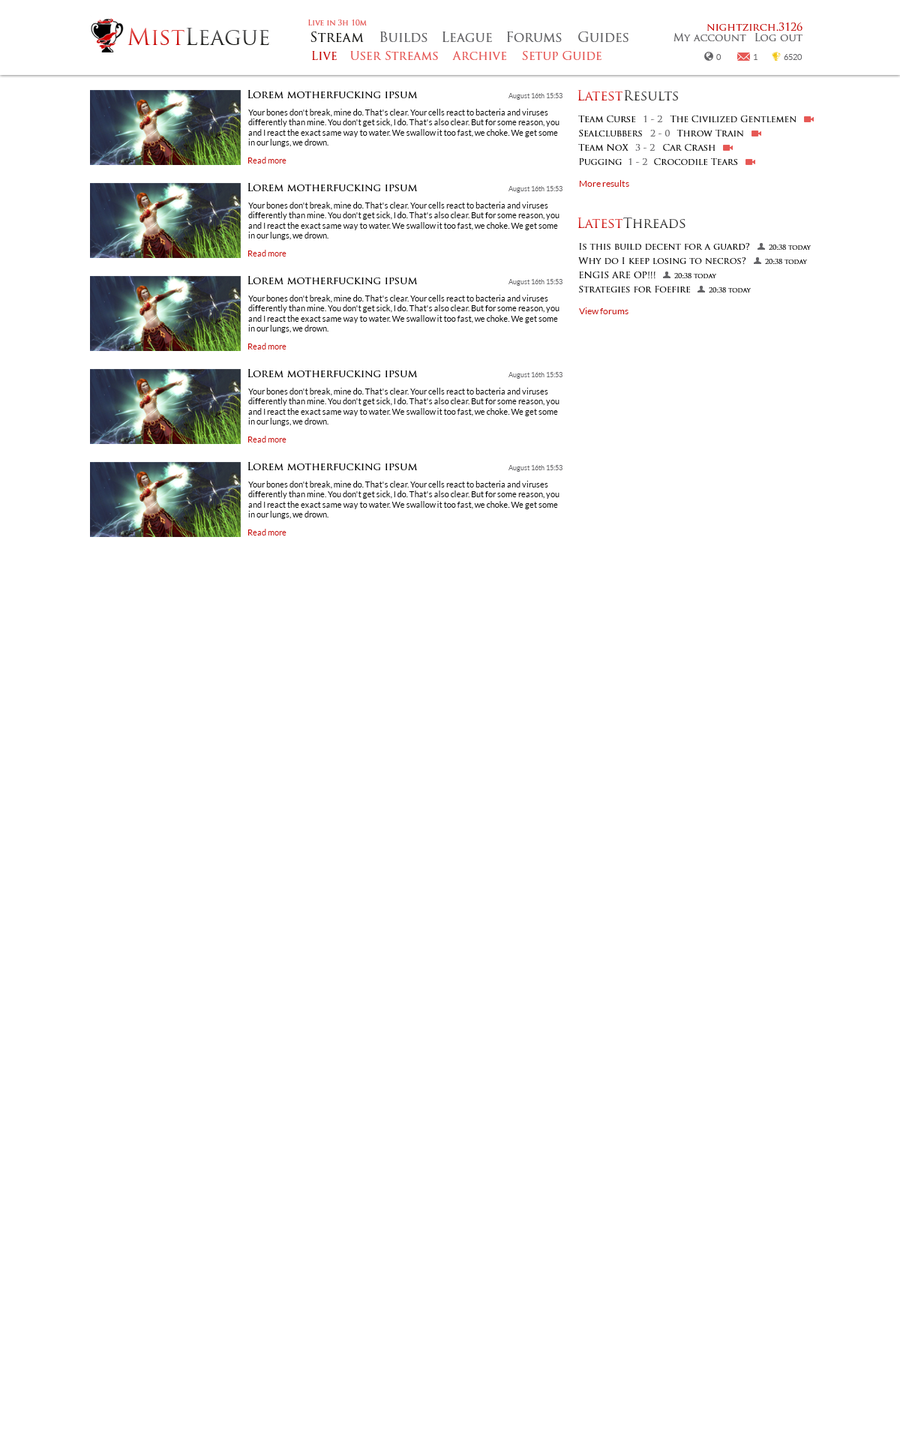
<style>
.page{position:relative;width:900px;height:1440px;background:#ffffff}
.page>*{position:absolute;margin:0}
.t1{font:22.5px "TrajanPro-Regular"}
.t2{font:7.5px "TrajanPro-Regular";color:#e65754}
.t3{font:10.5px "TrajanPro-Regular";color:#c90400}
.t4{font:13.5px "TrajanPro-Regular";color:#1c1c19}
.t5{font:13.5px "TrajanPro-Regular";color:#636366}
.t6{font:10.5px "TrajanPro-Regular";color:#636366}
.t7{font:12px "TrajanPro-Regular";color:#c90400}
.t8{font:12px "TrajanPro-Regular";color:#e65754}
.t9{font:8.2px "Lato-Regular";color:#636366}
.t10{font:10.5px "TrajanPro-Regular";color:#000000}
.t11{font:6.8px "Lato-Regular";color:#636366}
.t12{font:13.4px "TrajanPro-Regular"}
.t13{font:8.2px "Lato-Regular";color:#000000}
.t14{font:9px "TrajanPro-Regular";color:#000000}
.t15{font:9px "TrajanPro-Regular";color:#636366}
.t16{font:8.2px "Lato-Regular";color:#c90400}
.t17{font:9px "Lato-Regular";color:#c90400}
.t18{font:6.8px "TrajanPro-Regular";color:#000000}
</style>
<div class="page">
<p class="t1" style="left:128px;top:28px;width:56px;height:17px">Mist</p>
<p class="t1" style="left:186px;top:28px;width:83px;height:17px">League</p>
<p class="t2" style="left:308px;top:20px;width:59px;height:6px">Live in 3h 10m</p>
<p class="t3" style="left:706px;top:22px;width:96px;height:9px">nightzirch.3126</p>
<p class="t4" style="left:310px;top:32px;width:54px;height:10px">Stream</p>
<p class="t5" style="left:380px;top:32px;width:48px;height:10px">Builds</p>
<p class="t5" style="left:442px;top:32px;width:50px;height:10px">League</p>
<p class="t5" style="left:506px;top:32px;width:56px;height:10px">Forums</p>
<p class="t5" style="left:578px;top:32px;width:50px;height:10px">Guides</p>
<p class="t6" style="left:674px;top:33px;width:128px;height:8px">My account Log out</p>
<p class="t7" style="left:312px;top:51px;width:25px;height:9px">Live</p>
<p class="t8" style="left:350px;top:51px;width:88px;height:9px">User Streams</p>
<p class="t8" style="left:452px;top:51px;width:54px;height:9px">Archive</p>
<p class="t8" style="left:522px;top:51px;width:80px;height:9px">Setup Guide</p>
<p class="t9" style="left:716px;top:54px;width:5px;height:6px">0</p>
<p class="t9" style="left:754px;top:54px;width:4px;height:6px">1</p>
<p class="t9" style="left:784px;top:54px;width:18px;height:6px">6520</p>
<p class="t10" style="left:248px;top:90px;width:170px;height:8px">Lorem motherfucking ipsum</p>
<p class="t11" style="left:508px;top:93px;width:54px;height:7px">August 16th 15:53</p>
<p class="t12" style="left:578px;top:90px;width:44px;height:10px">Latest</p>
<p class="t12" style="left:624px;top:90px;width:54px;height:10px">Results</p>
<p class="t13" style="left:248px;top:109px;width:312px;height:38px">Your bones don't break, mine do. That's clear. Your cells react to bacteria and viruses differently than mine. You don't get sick, I do. That's also clear. But for some reason, you and I react the exact same way to water. We swallow it too fast, we choke. We get some in our lungs, we drown.</p>
<p class="t14" style="left:578px;top:116px;width:57px;height:6px">Team Curse</p>
<p class="t15" style="left:644px;top:116px;width:18px;height:6px">1 - 2</p>
<p class="t14" style="left:670px;top:116px;width:126px;height:6px">The Civilized Gentlemen</p>
<p class="t14" style="left:579px;top:130px;width:63px;height:6px">Sealclubbers</p>
<p class="t15" style="left:650px;top:130px;width:20px;height:6px">2 - 0</p>
<p class="t14" style="left:676px;top:130px;width:68px;height:6px">Throw Train</p>
<p class="t14" style="left:578px;top:144px;width:50px;height:7px">Team NoX</p>
<p class="t15" style="left:635px;top:144px;width:20px;height:7px">3 - 2</p>
<p class="t14" style="left:663px;top:144px;width:53px;height:7px">Car Crash</p>
<p class="t16" style="left:248px;top:157px;width:38px;height:7px">Read more</p>
<p class="t14" style="left:579px;top:158px;width:43px;height:7px">Pugging</p>
<p class="t15" style="left:628px;top:158px;width:19px;height:7px">1 - 2</p>
<p class="t14" style="left:654px;top:158px;width:84px;height:7px">Crocodile Tears</p>
<p class="t10" style="left:248px;top:183px;width:170px;height:8px">Lorem motherfucking ipsum</p>
<p class="t17" style="left:580px;top:180px;width:49px;height:7px">More results</p>
<p class="t11" style="left:508px;top:186px;width:54px;height:7px">August 16th 15:53</p>
<p class="t13" style="left:248px;top:202px;width:312px;height:38px">Your bones don't break, mine do. That's clear. Your cells react to bacteria and viruses differently than mine. You don't get sick, I do. That's also clear. But for some reason, you and I react the exact same way to water. We swallow it too fast, we choke. We get some in our lungs, we drown.</p>
<p class="t12" style="left:578px;top:218px;width:44px;height:10px">Latest</p>
<p class="t12" style="left:623px;top:217px;width:63px;height:12px">Threads</p>
<p class="t14" style="left:579px;top:243px;width:171px;height:7px">Is this build decent for a guard?</p>
<p class="t18" style="left:769px;top:244px;width:43px;height:6px">20:38 today</p>
<p class="t16" style="left:248px;top:250px;width:38px;height:6px">Read more</p>
<p class="t14" style="left:578px;top:257px;width:168px;height:7px">Why do I keep losing to necros?</p>
<p class="t18" style="left:765px;top:259px;width:43px;height:5px">20:38 today</p>
<p class="t10" style="left:248px;top:276px;width:170px;height:8px">Lorem motherfucking ipsum</p>
<p class="t11" style="left:508px;top:279px;width:54px;height:7px">August 16th 15:53</p>
<p class="t14" style="left:579px;top:272px;width:77px;height:6px">ENGIS ARE OP!!!</p>
<p class="t18" style="left:674px;top:273px;width:43px;height:5px">20:38 today</p>
<p class="t14" style="left:579px;top:286px;width:111px;height:6px">Strategies for Foefire</p>
<p class="t18" style="left:709px;top:287px;width:43px;height:5px">20:38 today</p>
<p class="t13" style="left:248px;top:295px;width:312px;height:38px">Your bones don't break, mine do. That's clear. Your cells react to bacteria and viruses differently than mine. You don't get sick, I do. That's also clear. But for some reason, you and I react the exact same way to water. We swallow it too fast, we choke. We get some in our lungs, we drown.</p>
<p class="t17" style="left:579px;top:308px;width:49px;height:6px">View forums</p>
<p class="t16" style="left:248px;top:343px;width:38px;height:7px">Read more</p>
<p class="t10" style="left:248px;top:369px;width:170px;height:8px">Lorem motherfucking ipsum</p>
<p class="t11" style="left:508px;top:372px;width:54px;height:7px">August 16th 15:53</p>
<p class="t13" style="left:248px;top:388px;width:312px;height:38px">Your bones don't break, mine do. That's clear. Your cells react to bacteria and viruses differently than mine. You don't get sick, I do. That's also clear. But for some reason, you and I react the exact same way to water. We swallow it too fast, we choke. We get some in our lungs, we drown.</p>
<p class="t16" style="left:248px;top:436px;width:38px;height:6px">Read more</p>
<p class="t10" style="left:248px;top:462px;width:170px;height:8px">Lorem motherfucking ipsum</p>
<p class="t11" style="left:508px;top:465px;width:54px;height:7px">August 16th 15:53</p>
<p class="t13" style="left:248px;top:481px;width:312px;height:38px">Your bones don't break, mine do. That's clear. Your cells react to bacteria and viruses differently than mine. You don't get sick, I do. That's also clear. But for some reason, you and I react the exact same way to water. We swallow it too fast, we choke. We get some in our lungs, we drown.</p>
<p class="t16" style="left:248px;top:529px;width:38px;height:7px">Read more</p>
</div>
